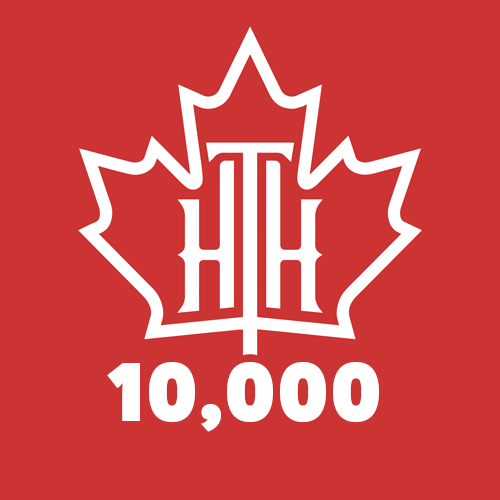
<style>
.page{position:relative;width:500px;height:500px;background:#cc3333}
.page>*{position:absolute;margin:0}
.t1{font:103px "Novecentosans-UltraBold";color:#ffffff}
</style>
<div class="page">
<p class="t1" style="left:107px;top:362px;width:272px;height:70px">10,000</p>
</div>
